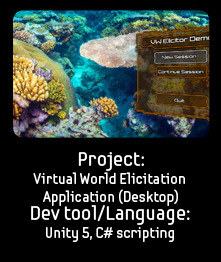
<style>
.page{position:relative;width:221px;height:262px;background:#000000}
.page>*{position:absolute;margin:0}
.t1{font:15px "SamsungImaginationBold";color:#ffffff}
.t2{font:20px "SamsungImaginationBold";color:#ffffff}
</style>
<div class="page">
<p class="t1" style="left:33px;top:152px;width:152px;height:54px;text-align:center"><span class="t2">Project:<br></span>Virtual World Elicitation <br>Application (Desktop)</p>
<p class="t1" style="left:31px;top:205px;width:159px;height:37px;text-align:center"><span class="t2">Dev tool/Language:<br></span>Unity 5, C# scripting</p>
</div>
